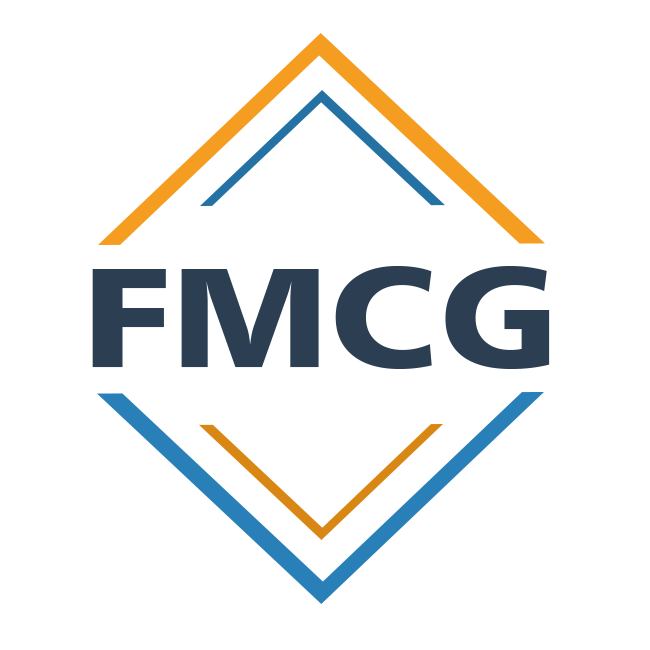
<style>
.page{position:relative;width:650px;height:650px;background:#ffffff}
.page>*{position:absolute;margin:0}
.t1{font:141.5px "Humanist777BT-BlackB";color:#2c3e51;scale:1.13 1}
</style>
<div class="page">
<p class="t1" style="left:92px;top:266px;width:458px;height:103px">FMCG</p>
</div>
